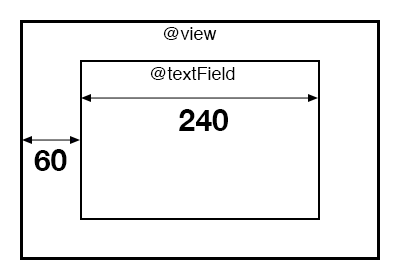
<style>
.page{position:relative;width:400px;height:280px;background:#ffffff}
.page>*{position:absolute;margin:0}
.t1{font:18px "Helvetica";color:#000000}
.t2{font:30px "HelveticaNeue-Bold";color:#000000}
</style>
<div class="page">
<p class="t1" style="left:163px;top:27px;width:54px;height:13px">@view</p>
<p class="t1" style="left:150px;top:67px;width:85px;height:13px">@textField</p>
<p class="t2" style="left:179px;top:109px;width:49px;height:22px">240</p>
<p class="t2" style="left:34px;top:149px;width:33px;height:22px">60</p>
</div>
